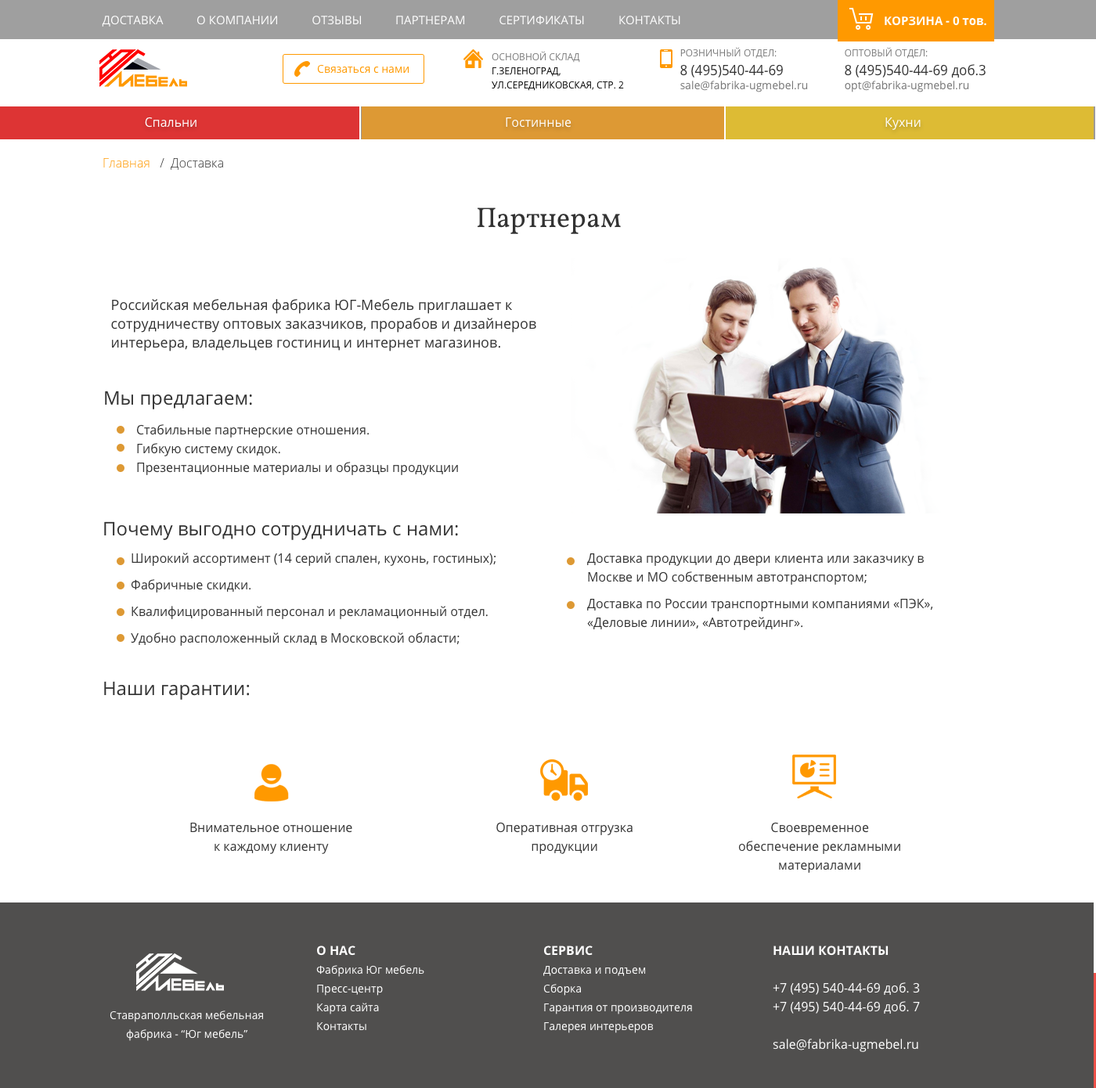
<style>
.page{position:relative;width:1096px;height:1088px;background:#ffffff}
.page>*{position:absolute;margin:0}
.t1{font:11.7px "OpenSans";color:#ffffff;text-transform:uppercase}
.t2{font:11.7px "OpenSans-Bold";color:#ffffff;text-transform:uppercase}
.t3{font:11.7px "OpenSans-Bold";color:#ffffff}
.t4{font:9.4px/14.1px "OpenSans";color:#000000;text-transform:uppercase}
.t5{font:9.4px/14.1px "OpenSans";color:#777777;text-transform:uppercase}
.t6{font:11px/14.1px "OpenSans";color:#777777}
.t7{font:13.3px/18.8px "OpenSans";color:#333333}
.t8{font:11px "OpenSans";color:#ff9900}
.t9{font:12.5px "OpenSans";color:#ffffff}
.t10{font:12.5px "OpenSans-Light";color:#333333}
.t11{font:12.5px "OpenSans-Light";color:#ff9900}
.t12{font:28.2px "Vollkorn-Regular";color:#333333}
.t13{font:14.1px/18.8px "OpenSans";color:#333333}
.t14{font:18.8px "OpenSans";color:#333333}
.t15{font:12.5px/18.8px "OpenSans";color:#333333}
.t16{font:11px/18.8px "OpenSans";color:#ffffff}
.t17{font:12.5px/18.8px "OpenSans-Bold";color:#ffffff;text-transform:uppercase}
.t18{font:12.5px/18.8px "OpenSans";color:#ffffff}
</style>
<div class="page">
<p class="t1" style="left:102px;top:16px;width:578px;height:11px">Доставка           О компании           Отзывы           Партнерам           Сертификаты           Контакты</p>
<p class="t2" style="left:885px;top:16px;width:101px;height:10px">Корзина - 0 <span class="t3">тов.</span></p>
<p class="t4" style="left:492px;top:51px;width:132px;height:40px"><span class="t5">Основной склад<br></span>г.Зеленоград, ул.Середниковская, стр. 2</p>
<p class="t6" style="left:680px;top:47px;width:128px;height:45px"><span class="t5">Розничный отдел:<br></span><span class="t7">8 (495)540-44-69<br></span>sale@fabrika-ugmebel.ru</p>
<p class="t7" style="left:845px;top:47px;width:141px;height:45px"><span class="t5">Оптовый отдел:<br></span>8 (495)540-44-69 доб.3<br><span class="t6">opt@fabrika-ugmebel.ru</span></p>
<p class="t8" style="left:317px;top:64px;width:92px;height:10px">Связаться с нами</p>
<p class="t9" style="left:145px;top:117px;width:51px;height:11px">Спальни</p>
<p class="t9" style="left:506px;top:117px;width:65px;height:11px">Гостинные</p>
<p class="t9" style="left:885px;top:117px;width:36px;height:13px">Кухни</p>
<p class="t10" style="left:103px;top:158px;width:120px;height:12px"><span class="t11">Главная</span>   /  Доставка</p>
<p class="t12" style="left:478px;top:207px;width:143px;height:27px">Партнерам</p>
<p class="t13" style="left:111px;top:299px;width:425px;height:52px">Российская мебельная фабрика ЮГ-Мебель приглашает к сотрудничеству оптовых заказчиков, прорабов и дизайнеров интерьера, владельцев гостиниц и интернет магазинов.</p>
<p class="t14" style="left:105px;top:391px;width:147px;height:18px">Мы предлагаем:</p>
<p class="t15" style="left:137px;top:424px;width:321px;height:51px">Стабильные партнерские отношения.<br>Гибкую систему скидок.<br>Презентационные материалы и образцы продукции</p>
<p class="t14" style="left:104px;top:521px;width:354px;height:19px">Почему выгодно сотрудничать с нами:</p>
<p class="t15" style="left:131px;top:553px;width:365px;height:93px">Широкий ассортимент (14 серий спален, кухонь, гостиных);<br>Фабричные скидки.<br>Квалифицированный персонал и рекламационный отдел.<br>Удобно расположенный склад в Московской области;</p>
<p class="t15" style="left:587px;top:553px;width:346px;height:77px">Доставка продукции до двери клиента или заказчику в Москве и МО собственным автотранспортом;<br>Доставка по России транспортными компаниями «ПЭК», «Деловые линии», «Автотрейдинг».</p>
<p class="t14" style="left:104px;top:681px;width:146px;height:19px">Наши гарантии:</p>
<p class="t15" style="left:496px;top:822px;width:136px;height:32px;text-align:center">Оперативная отгрузка продукции</p>
<p class="t15" style="left:738px;top:822px;width:162px;height:51px;text-align:center">Своевременное обеспечение рекламными материалами</p>
<p class="t15" style="left:190px;top:823px;width:162px;height:31px;text-align:center">Внимательное отношение к каждому клиенту</p>
<p class="t16" style="left:316px;top:946px;width:108px;height:85px"><span class="t17">О нас<br></span>Фабрика Юг мебель<br>Пресс-центр<br>Карта сайта<br>Контакты</p>
<p class="t16" style="left:543px;top:946px;width:149px;height:87px"><span class="t17">Сервис<br></span>Доставка и подъем<br>Сборка<br>Гарантия от производителя<br>Галерея интерьеров</p>
<p class="t18" style="left:773px;top:946px;width:147px;height:106px"><span class="t17">Наши контакты<br><br></span>+7 (495) 540-44-69 доб. 3<br>+7 (495) 540-44-69 доб. 7<br><br>sale@fabrika-ugmebel.ru</p>
<p class="t16" style="left:110px;top:1011px;width:153px;height:30px;text-align:center">Ставраполльская мебельная фабрика - “Юг мебель”</p>
</div>
